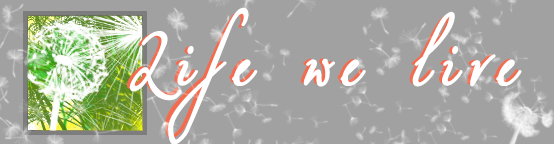
<style>
.page{position:relative;width:554px;height:144px;background:#a1a1a1}
.page>*{position:absolute;margin:0}
.t1{font:93px "Miama";letter-spacing:0.15em;font-weight:bold;scale:0.82 1}
.t2{font:99.4px "Miama";letter-spacing:0.15em;color:#ffffff;font-weight:bold;scale:0.77 1}
</style>
<div class="page">
<p class="t1" style="left:126px;top:10px;width:393px;height:129px">Life we live</p>
<p class="t2" style="left:129px;top:7px;width:393px;height:138px">Life we live</p>
</div>
